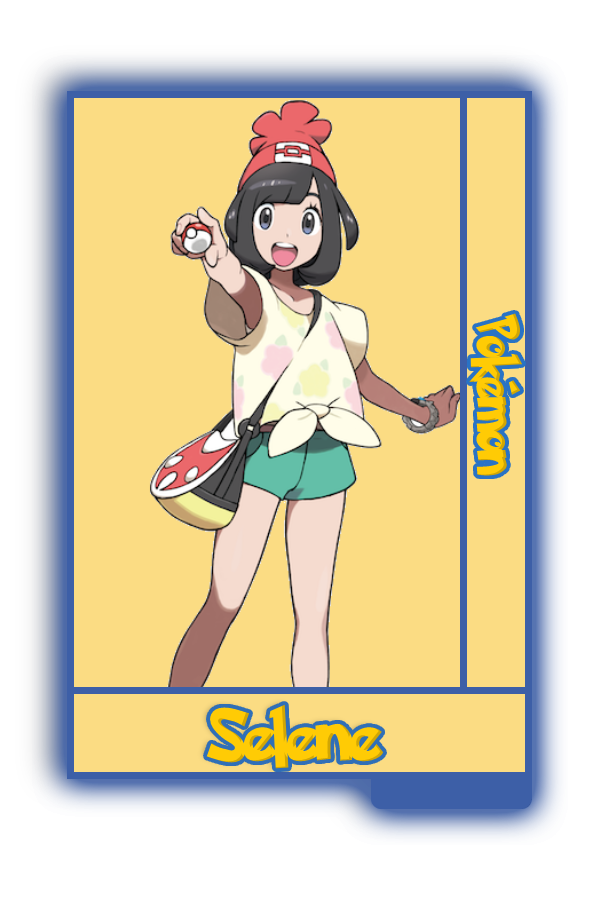
<style>
.page{position:relative;width:600px;height:900px;background:#fbdc83}
.page>*{position:absolute;margin:0}
.t1{font:48.8px "PokemonSolidNormal";color:#ffcb05;scale:0.8 1}
.t2{font:60.1px "PokemonSolidNormal";color:#ffcb05;scale:0.96 1}
</style>
<div class="page">
<p class="t1" style="left:469px;top:313px;width:54px;height:163px;rotate:90deg">Pokémon</p>
<p class="t2" style="left:206px;top:704px;width:178px;height:65px">Selene</p>
</div>
